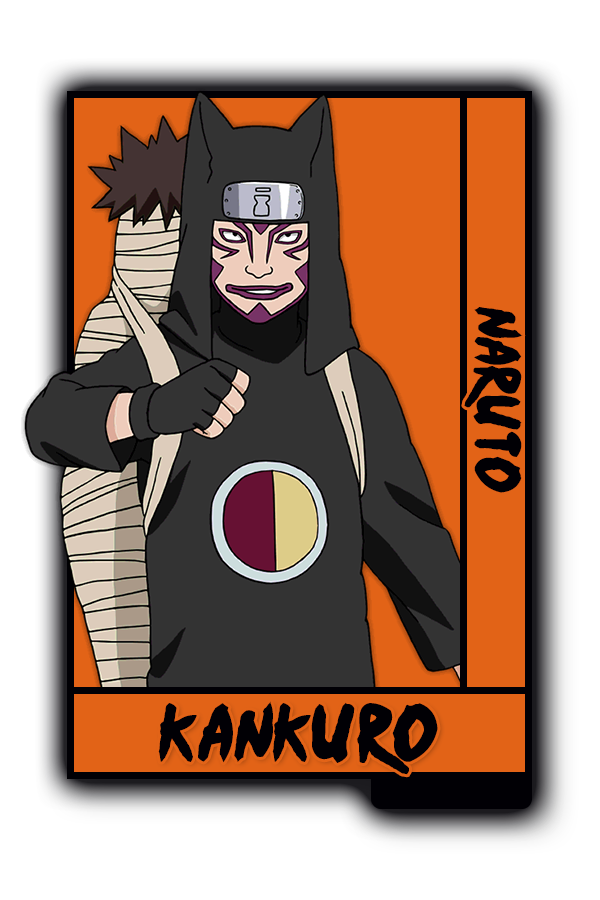
<style>
.page{position:relative;width:600px;height:900px;background:#ffffff}
.page>*{position:absolute;margin:0}
.t1{font:52px "Ninja-Naruto";color:#010005}
.t2{font:65.2px "Ninja-Naruto";color:#010005}
</style>
<div class="page">
<p class="t1" style="left:464px;top:307px;width:59px;height:186px;rotate:90deg">Naruto</p>
<p class="t2" style="left:158px;top:701px;width:280px;height:74px">Kankuro</p>
</div>
